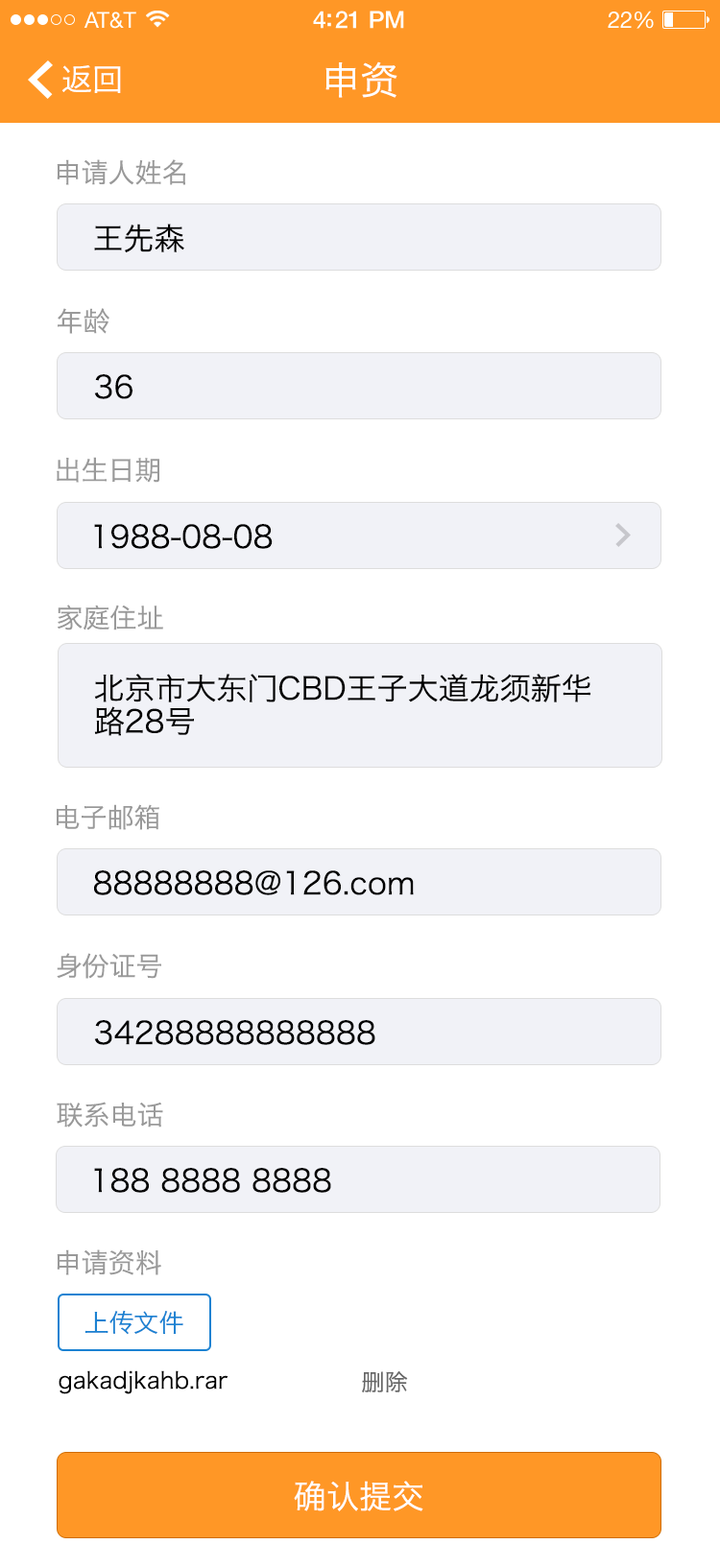
<style>
.page{position:relative;width:720px;height:1568px;background:#ffffff}
.page>*{position:absolute;margin:0}
.t1{font:30.7px "HiraginoSansGB-W3";color:#ffffff}
.t2{font:38.4px "HiraginoSansGB-W3";color:#ffffff}
.t3{font:26.9px "HiraginoSansGB-W3";color:#999999}
.t4{font:30.7px "HiraginoSansGB-W3";color:#000000}
.t5{font:24.9px "HiraginoSansGB-W3";color:#1b82d2}
.t6{font:23px "HiraginoSansGB-W3";color:#000000}
.t7{font:23px "HiraginoSansGB-W3";color:#666666}
.t8{font:32.6px "HiraginoSansGB-W3";color:#ffffff}
</style>
<div class="page">
<p class="t1" style="left:61px;top:65px;width:60px;height:28px">返回</p>
<p class="t2" style="left:325px;top:61px;width:72px;height:37px">申资</p>
<p class="t3" style="left:57px;top:159px;width:128px;height:26px">申请人姓名</p>
<p class="t4" style="left:94px;top:224px;width:90px;height:28px">王先森</p>
<p class="t3" style="left:58px;top:308px;width:51px;height:26px">年龄</p>
<p class="t4" style="left:94px;top:374px;width:38px;height:25px">36</p>
<p class="t3" style="left:57px;top:457px;width:102px;height:26px">出生日期</p>
<p class="t4" style="left:94px;top:524px;width:179px;height:25px">1988-08-08</p>
<p class="t3" style="left:58px;top:605px;width:105px;height:25px">家庭住址</p>
<p class="t4" style="left:94px;top:674px;width:496px;height:62px">北京市大东门CBD王子大道龙须新华<br>路28号</p>
<p class="t3" style="left:57px;top:804px;width:102px;height:26px">电子邮箱</p>
<p class="t4" style="left:94px;top:870px;width:320px;height:25px">88888888@126.com</p>
<p class="t3" style="left:57px;top:953px;width:104px;height:26px">身份证号</p>
<p class="t4" style="left:94px;top:1020px;width:281px;height:25px">34288888888888</p>
<p class="t3" style="left:57px;top:1102px;width:106px;height:26px">联系电话</p>
<p class="t4" style="left:94px;top:1168px;width:237px;height:25px">188 8888 8888</p>
<p class="t3" style="left:57px;top:1249px;width:104px;height:26px">申请资料</p>
<p class="t5" style="left:84px;top:1310px;width:99px;height:25px">上传文件</p>
<p class="t6" style="left:59px;top:1370px;width:168px;height:24px">gakadjkahb.rar</p>
<p class="t7" style="left:362px;top:1371px;width:46px;height:21px">删除</p>
<p class="t8" style="left:294px;top:1481px;width:129px;height:30px">确认提交</p>
</div>
